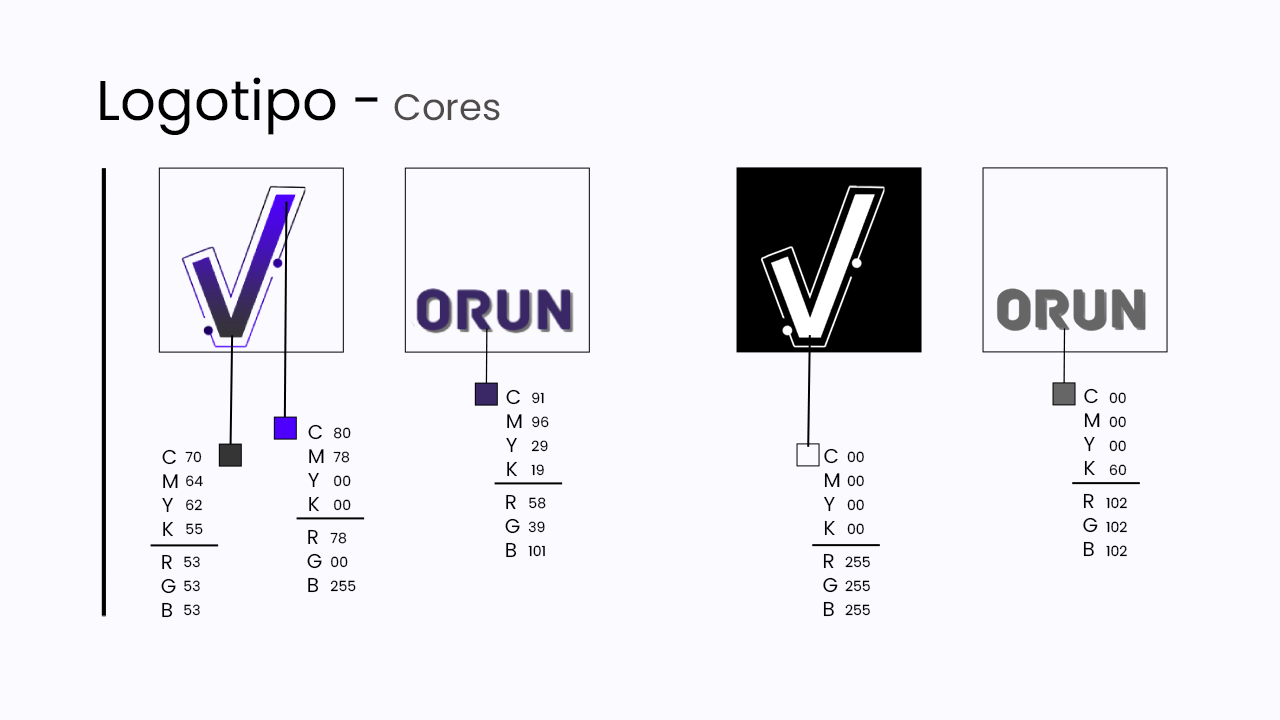
<style>
.page{position:relative;width:1280px;height:720px;background:#fbfbff}
.page>*{position:absolute;margin:0}
.t1{font:56px "Poppins-Regular";color:#000000}
.t2{font:37px "Poppins-Regular";color:#514c4c}
.t3{font:20px "Poppins-Regular";color:#000000}
.t4{font:14px/12px "Poppins-Regular";color:#000000}
</style>
<div class="page">
<p class="t1" style="left:100px;top:77px;width:400px;height:58px">Logotipo -<span class="t2"> Cores</span></p>
<p class="t3" style="left:506px;top:389px;width:16px;height:88px">C<br>M<br>Y<br>K</p>
<p class="t3" style="left:1084px;top:388px;width:16px;height:88px">C<br>M<br>Y<br>K</p>
<p class="t4" style="left:531px;top:392px;width:18px;height:84px">91<br><br>96<br><br>29<br><br>19</p>
<p class="t4" style="left:1109px;top:392px;width:18px;height:84px">00<br><br>00<br><br>00<br><br>60</p>
<p class="t3" style="left:308px;top:424px;width:16px;height:88px">C<br>M<br>Y<br>K</p>
<p class="t4" style="left:333px;top:427px;width:18px;height:84px">80<br><br>78<br><br>00<br><br>00</p>
<p class="t3" style="left:162px;top:449px;width:16px;height:88px">C<br>M<br>Y<br>K</p>
<p class="t3" style="left:824px;top:448px;width:16px;height:88px">C<br>M<br>Y<br>K</p>
<p class="t4" style="left:185px;top:451px;width:18px;height:84px">70<br><br>64<br><br>62<br><br>55</p>
<p class="t4" style="left:847px;top:451px;width:17px;height:84px">00<br><br>00<br><br>00<br><br>00</p>
<p class="t3" style="left:505px;top:494px;width:15px;height:64px">R <br>G<br>B</p>
<p class="t4" style="left:528px;top:497px;width:18px;height:60px">58<br><br>39<br><br>101</p>
<p class="t3" style="left:1083px;top:493px;width:15px;height:64px">R <br>G<br>B</p>
<p class="t4" style="left:1106px;top:497px;width:21px;height:60px">102<br><br>102<br><br>102</p>
<p class="t3" style="left:307px;top:529px;width:15px;height:64px">R <br>G<br>B</p>
<p class="t4" style="left:330px;top:532px;width:26px;height:60px">78<br><br>00<br><br>255</p>
<p class="t3" style="left:161px;top:554px;width:15px;height:64px">R <br>G<br>B</p>
<p class="t4" style="left:184px;top:556px;width:16px;height:60px">53<br><br>53<br><br>53</p>
<p class="t3" style="left:823px;top:553px;width:15px;height:64px">R <br>G<br>B</p>
<p class="t4" style="left:845px;top:556px;width:25px;height:60px">255<br><br>255<br><br>255</p>
</div>
